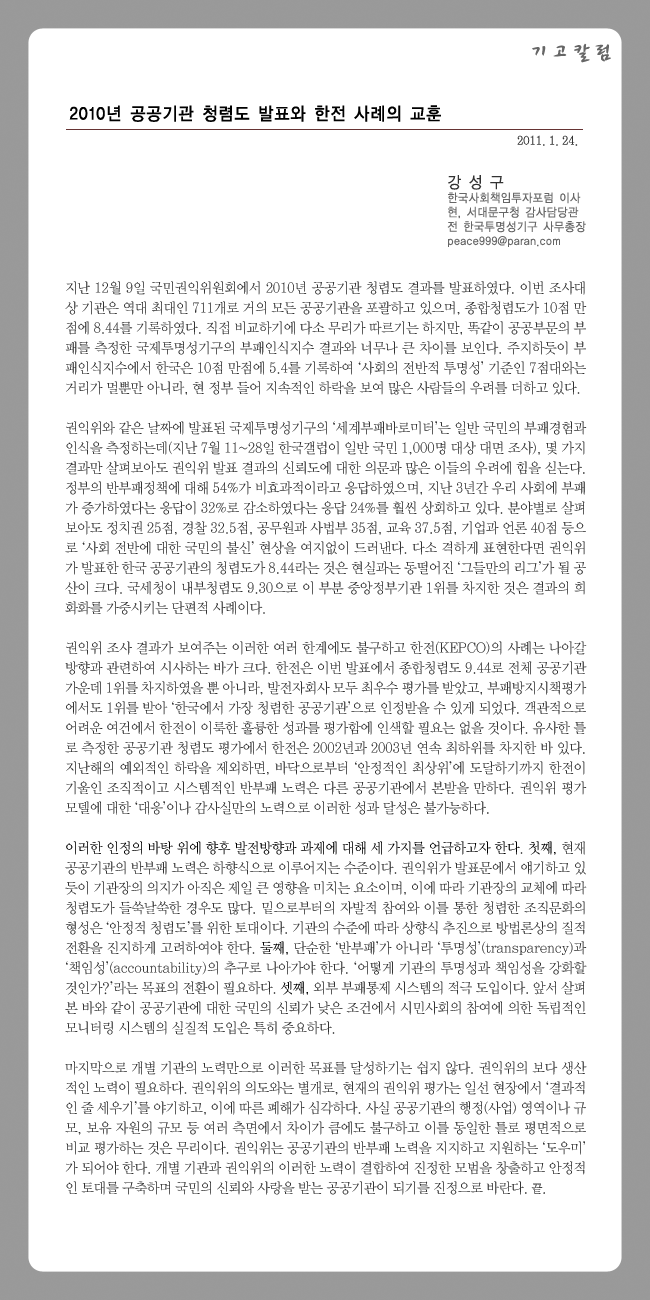
<style>
.page{position:relative;width:650px;height:1300px;background:#ffffff}
.page>*{position:absolute;margin:0}
.t1{font:24px "CwritB";letter-spacing:-0.01em;color:#666666;scale:0.9 1}
.t2{font:18px "YDIYGO130-KSCpc-EUC-H";letter-spacing:-0.01em;color:#000000;scale:0.9 1}
.t3{font:12px "YDIWebBatan";letter-spacing:-0.01em;color:#333333;scale:0.95 1}
.t4{font:12px "YDIYGO120-KSCpc-EUC-H";letter-spacing:-0.01em;color:#666666;scale:0.9 1}
.t5{font:16px "YDIYGO120-KSCpc-EUC-H";letter-spacing:-0.01em;color:#333333;scale:0.9 1}
.t6{font:14px/20px "YDIWebBatan";letter-spacing:-0.01em;color:#333333;scale:0.95 1}
.t7{font:14px/20px "YDIWebBatan";letter-spacing:-0.01em;color:#000000;scale:0.95 1}
.t8{font:12px/20px "YDIWebBatan";letter-spacing:-0.01em;color:#333333;scale:0.95 1}
</style>
<div class="page">
<p class="t1" style="left:532px;top:43px;width:79px;height:20px">기고칼럼</p>
<p class="t2" style="left:69px;top:105px;width:372px;height:17px">2010년 공공기관 청렴도 발표와 한전 사례의 교훈</p>
<p class="t3" style="left:517px;top:135px;width:61px;height:11px">2011. 1. 24.</p>
<p class="t4" style="left:447px;top:175px;width:139px;height:72px"><span class="t5">강 성 구<br></span>한국사회책임투자포럼 이사<br>현, 서대문구청 감사담당관<br>전 한국투명성기구 사무총장<br>peace999@paran.com</p>
<p class="t6" style="left:65px;top:281px;width:522px;height:914px;text-align:justify">지난 12월 9일 국민권익위원회에서 2010년 공공기관 청렴도 결과를 발표하였다. 이번 조사대상 기관은 역대 최대인 711개로 거의 모든 공공기관을 포괄하고 있으며, 종합청렴도가 10점 만점에 8.44를 기록하였다. 직접 비교하기에 다소 무리가 따르기는 하지만, 똑같이 공공부문의 부패를 측정한 국제투명성기구의 부패인식지수 결과와 너무나 큰 차이를 보인다. 주지하듯이 부패인식지수에서 한국은 10점 만점에 5.4를 기록하여 ‘사회의 전반적 투명성’ 기준인 7점대와는 거리가 멀뿐만 아니라, 현 정부 들어 지속적인 하락을 보여 많은 사람들의 우려를 더하고 있다. <br><br>권익위와 같은 날짜에 발표된 국제투명성기구의 ‘세계부패바로미터’는 일반 국민의 부패경험과 인식을 측정하는데(지난 7월 11~28일 한국갤럽이 일반 국민 1,000명 대상 대면 조사), 몇 가지 결과만 살펴보아도 권익위 발표 결과의 신뢰도에 대한 의문과 많은 이들의 우려에 힘을 싣는다. 정부의 반부패정책에 대해 54%가 비효과적이라고 응답하였으며, 지난 3년간 우리 사회에 부패가 증가하였다는 응답이 32%로 감소하였다는 응답 24%를 훨씬 상회하고 있다. 분야별로 살펴보아도 정치권 25점, 경찰 32.5점, 공무원과 사법부 35점, 교육 37.5점, 기업과 언론 40점 등으로 ‘사회 전반에 대한 국민의 불신’ 현상을 여지없이 드러낸다. 다소 격하게 표현한다면 권익위가 발표한 한국 공공기관의 청렴도가 8.44라는 것은 현실과는 동떨어진 ‘그들만의 리그’가 될 공산이 크다. 국세청이 내부청렴도 9.30으로 이 부분 중앙정부기관 1위를 차지한 것은 결과의 희화화를 가중시키는 단편적 사례이다.<br><br>권익위 조사 결과가 보여주는 이러한 여러 한계에도 불구하고 한전(KEPCO)의 사례는 나아갈 방향과 관련하여 시사하는 바가 크다. 한전은 이번 발표에서 종합청렴도 9.44로 전체 공공기관 가운데 1위를 차지하였을 뿐 아니라, 발전자회사 모두 최우수 평가를 받았고, 부패방지시책평가에서도 1위를 받아 ‘한국에서 가장 청렴한 공공기관’으로 인정받을 수 있게 되었다. 객관적으로 어려운 여건에서 한전이 이룩한 훌륭한 성과를 평가함에 인색할 필요는 없을 것이다. 유사한 틀로 측정한 공공기관 청렴도 평가에서 한전은 2002년과 2003년 연속 최하위를 차지한 바 있다. 지난해의 예외적인 하락을 제외하면, 바닥으로부터 ‘안정적인 최상위’에 도달하기까지 한전이 기울인 조직적이고 시스템적인 반부패 노력은 다른 공공기관에서 본받을 만하다. 권익위 평가 모델에 대한 ‘대응’이나 감사실만의 노력으로 이러한 성과 달성은 불가능하다. <br><br><span class="t7">이러한 인정의 바탕 위에 향후 발전방향과 과제에 대해 세 가지를 언급하고자 한다</span>. <span class="t7">첫째,</span> 현재 공공기관의 반부패 노력은 하향식으로 이루어지는 수준이다. 권익위가 발표문에서 얘기하고 있듯이 기관장의 의지가 아직은 제일 큰 영향을 미치는 요소이며, 이에 따라 기관장의 교체에 따라 청렴도가 들쑥날쑥한 경우도 많다. 밑으로부터의 자발적 참여와 이를 통한 청렴한 조직문화의 형성은 ‘안정적 청렴도’를 위한 토대이다. 기관의 수준에 따라 상향식 추진으로 방법론상의 질적 전환을 진지하게 고려하여야 한다. <span class="t7">둘째, </span>단순한 ‘반부패’가 아니라 ‘투명성’(transparency)과 ‘책임성’(accountability)의 추구로 나아가야 한다. ‘어떻게 기관의 투명성과 책임성을 강화할 것인가?’라는 목표의 전환이 필요하다. <span class="t7">셋째,</span> 외부 부패통제 시스템의 적극 도입이다. 앞서 살펴본 바와 같이 공공기관에 대한 국민의 신뢰가 낮은 조건에서 시민사회의 참여에 의한 독립적인 모니터링 시스템의 실질적 도입은 특히 중요하다. <br><br>마지막으로 개별 기관의 노력만으로 이러한 목표를 달성하기는 쉽지 않다. 권익위의 보다 생산적인 노력이 필요하다. 권익위의 의도와는 별개로, 현재의 권익위 평가는 일선 현장에서 ‘결과적인 줄 세우기’를 야기하고, 이에 따른 폐해가 심각하다. 사실 공공기관의 행정(사업) 영역이나 규모, 보유 자원의 규모 등 여러 측면에서 차이가 큼에도 불구하고 이를 동일한 틀로 평면적으로 비교 평가하는 것은 무리이다. 권익위는 공공기관의 반부패 노력을 지지하고 지원하는 ‘도우미’가 되어야 한다. 개별 기관과 권익위의 이러한 노력이 결합하여 진정한 모범을 창출하고 안정적인 토대를 구축하며 국민의 신뢰와 사랑을 받는 공공기관이 되기를 진정으로 바란다. <span class="t8">끝.</span></p>
</div>
